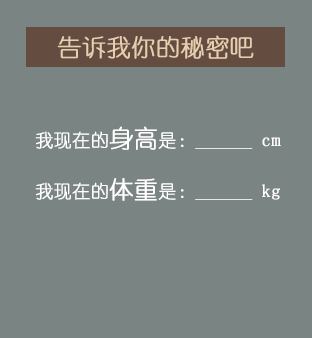
<style>
.page{position:relative;width:312px;height:338px;background:#798483}
.page>*{position:absolute;margin:0}
.t1{font:24px "YouYuan";color:#e8ceb0;font-weight:bold}
.t2{font:18px "YouYuan";color:#ffffff;font-weight:bold}
.t3{font:24px "YouYuan";color:#ffffff;font-weight:bold}
</style>
<div class="page">
<p class="t1" style="left:57px;top:35px;width:197px;height:24px">告诉我你的秘密吧</p>
<p class="t2" style="left:35px;top:126px;width:246px;height:24px">我现在的<span class="t3">身高</span>是：______ cm</p>
<p class="t2" style="left:35px;top:178px;width:245px;height:23px">我现在的<span class="t3">体重</span>是：______ kg</p>
</div>
